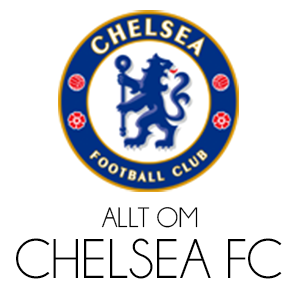
<style>
.page{position:relative;width:300px;height:300px;background:#ffffff}
.page>*{position:absolute;margin:0}
.t1{font:28.3px "Champagne&Limousines";color:#000000}
.t2{font:56.5px "Champagne&Limousines";color:#000000}
</style>
<div class="page">
<p class="t1" style="left:101px;top:207px;width:97px;height:21px">ALLT OM</p>
<p class="t2" style="left:16px;top:238px;width:266px;height:41px">CHELSEA FC</p>
</div>
